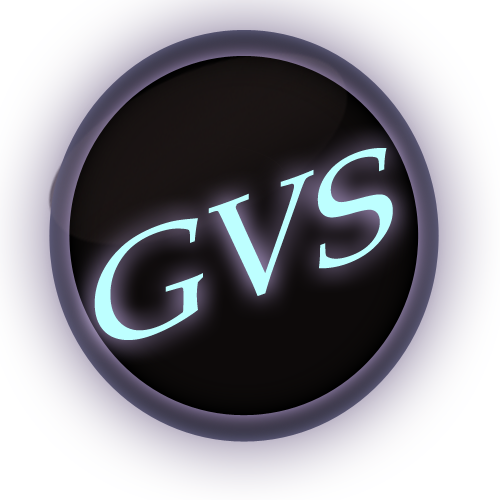
<style>
.page{position:relative;width:500px;height:500px}
.page>*{position:absolute;margin:0}
.t1{font:150px "BookAntiqua";color:#bdffff;scale:1.07 1}
</style>
<div class="page">
<p class="t1" style="left:94px;top:148px;width:299px;height:192px;rotate:-20deg">GVS</p>
</div>
